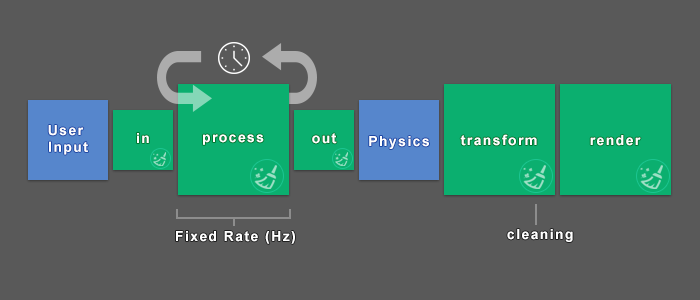
<style>
.page{position:relative;width:700px;height:300px;background:#595959}
.page>*{position:absolute;margin:0}
.t1{font:14px "Arial-BoldMT";letter-spacing:0.1em;color:#ffffff}
</style>
<div class="page">
<p class="t1" style="left:48px;top:125px;width:40px;height:30px;text-align:center">User <br>Input</p>
<p class="t1" style="left:137px;top:133px;width:12px;height:10px">in</p>
<p class="t1" style="left:203px;top:134px;width:61px;height:11px">process</p>
<p class="t1" style="left:312px;top:133px;width:25px;height:11px">out</p>
<p class="t1" style="left:369px;top:136px;width:60px;height:13px">Physics</p>
<p class="t1" style="left:460px;top:134px;width:77px;height:12px">transform</p>
<p class="t1" style="left:590px;top:135px;width:51px;height:11px">render</p>
<p class="t1" style="left:176px;top:231px;width:119px;height:13px">Fixed Rate (Hz)</p>
<p class="t1" style="left:507px;top:229px;width:66px;height:13px">cleaning</p>
</div>
